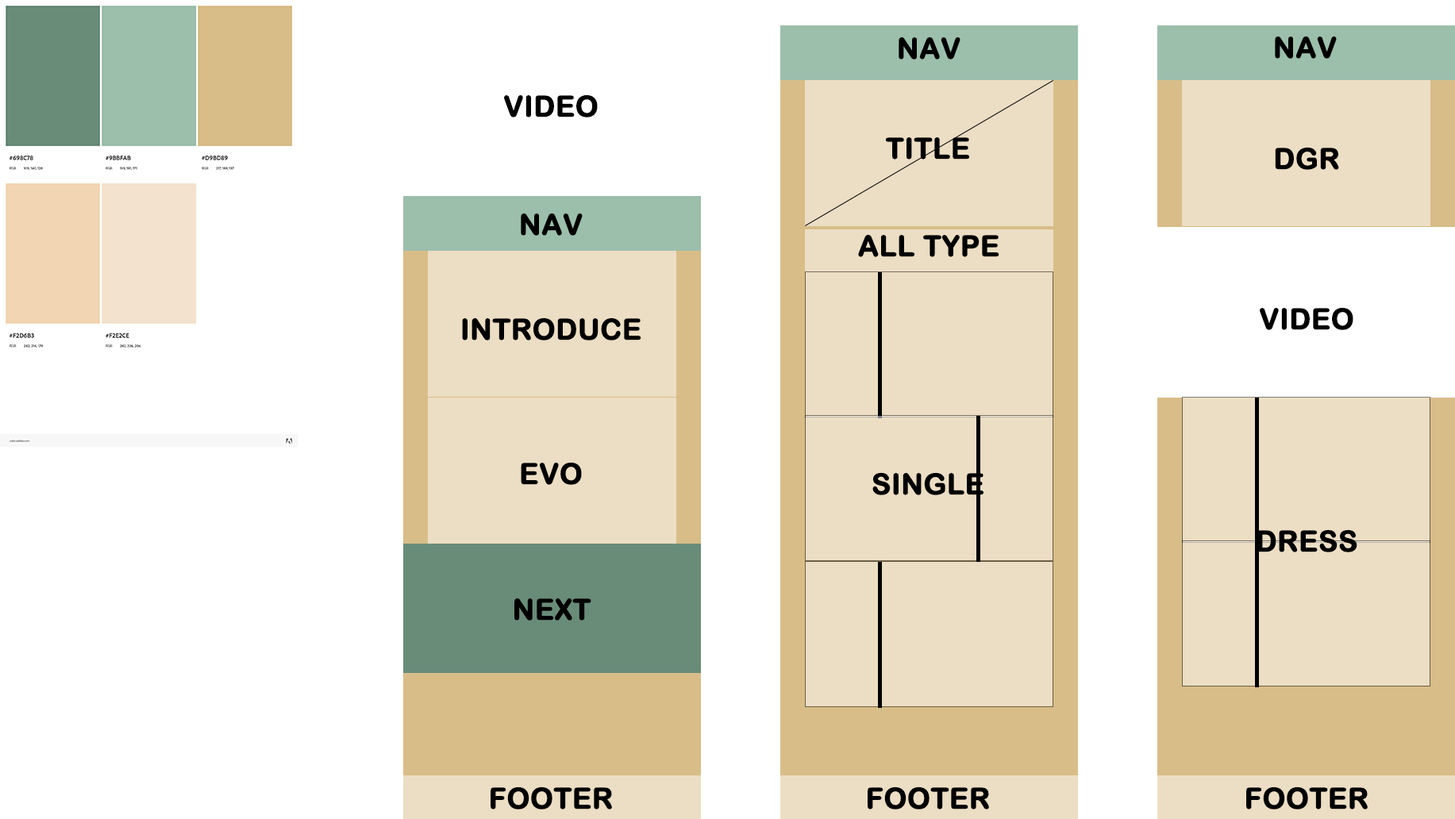
<style>
.page{position:relative;width:1455px;height:819px;background:#ffffff}
.page>*{position:absolute;margin:0}
.t1{font:28.6px "ArialRoundedMTBold";color:#000000;font-weight:bold}
</style>
<div class="page">
<p class="t1" style="left:899px;top:37px;width:62px;height:23px">NAV</p>
<p class="t1" style="left:1275px;top:36px;width:62px;height:23px">NAV</p>
<p class="t1" style="left:504px;top:94px;width:94px;height:24px">VIDEO</p>
<p class="t1" style="left:885px;top:137px;width:85px;height:23px">TITLE</p>
<p class="t1" style="left:1275px;top:147px;width:64px;height:23px">DGR</p>
<p class="t1" style="left:521px;top:213px;width:62px;height:23px">NAV</p>
<p class="t1" style="left:858px;top:234px;width:142px;height:23px">ALL TYPE</p>
<p class="t1" style="left:462px;top:318px;width:180px;height:23px">INTRODUCE</p>
<p class="t1" style="left:1260px;top:307px;width:94px;height:23px">VIDEO</p>
<p class="t1" style="left:521px;top:462px;width:61px;height:23px">EVO</p>
<p class="t1" style="left:873px;top:472px;width:112px;height:23px">SINGLE</p>
<p class="t1" style="left:1258px;top:530px;width:100px;height:23px">DRESS</p>
<p class="t1" style="left:514px;top:598px;width:77px;height:23px">NEXT</p>
<p class="t1" style="left:491px;top:787px;width:121px;height:23px">FOOTER</p>
<p class="t1" style="left:868px;top:787px;width:121px;height:23px">FOOTER</p>
<p class="t1" style="left:1247px;top:787px;width:121px;height:23px">FOOTER</p>
</div>
